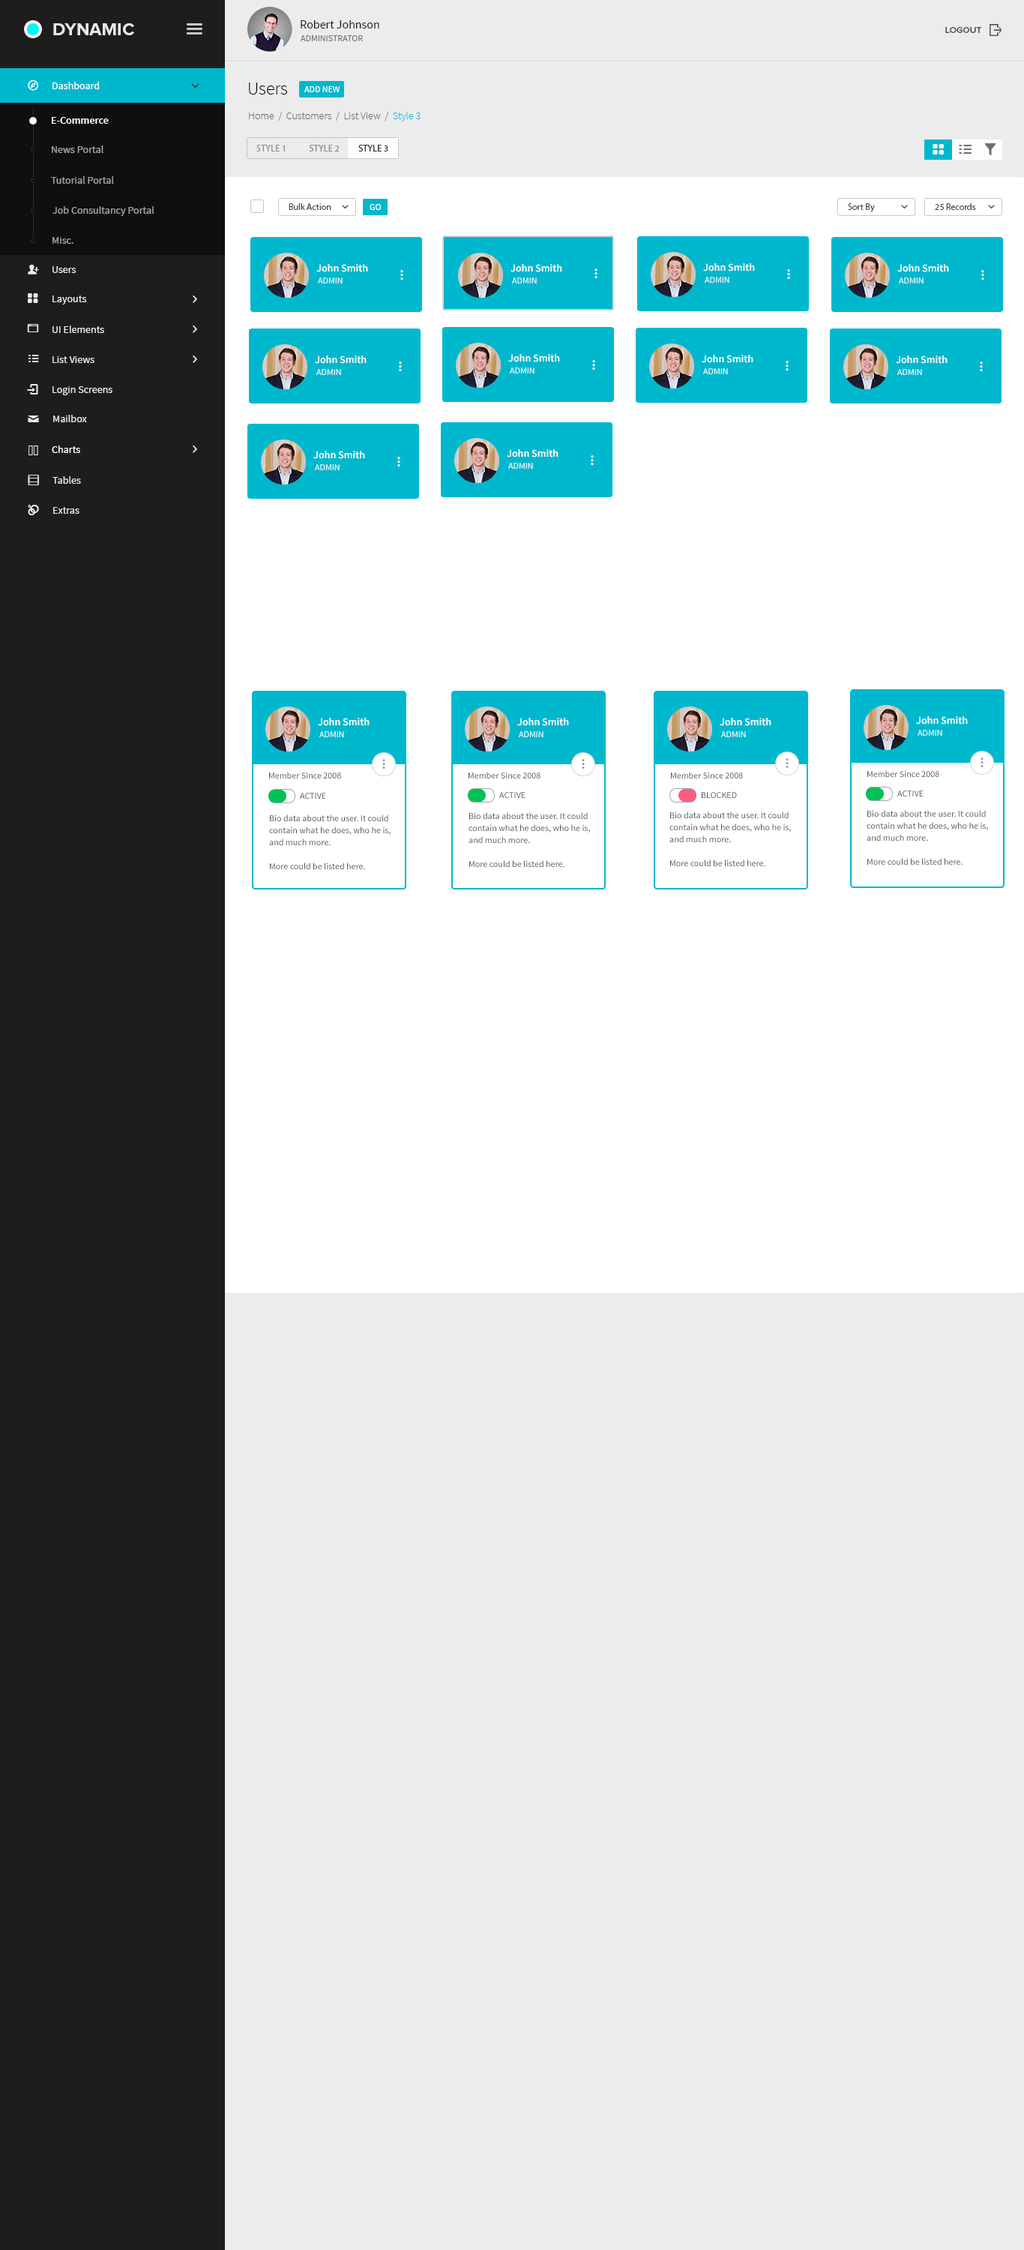
<style>
.page{position:relative;width:1024px;height:2250px;background:#ececec}
.page>*{position:absolute;margin:0}
.t1{font:18px "ProximaNova-Bold";color:#eae7e7;text-transform:uppercase}
.t2{font:12px "SourceSansPro-Regular";color:#1d1d1d}
.t3{font:9px "ProximaNova-Semibold";color:#535353;font-variant:small-caps}
.t4{font:9px "SourceSansPro-Regular";color:#767575}
.t5{font:10.5px "SourceSansPro-Regular";color:#ffffff}
.t6{font:10.5px "SourceSansPro-Regular";color:#ffffff;font-variant:small-caps}
.t7{font:18px "SourceSansPro-Light";color:#010101}
.t8{font:9px "SourceSansPro-Regular";color:#ffffff;text-transform:uppercase}
.t9{font:10.5px "SourceSansPro-Light";color:#6d6c6c}
.t10{font:10.5px "SourceSansPro-Light";color:#00b8ce}
.t11{font:10.5px "SourceSansPro-Semibold";color:#ffffff}
.t12{font:10.5px "SourceSansPro-Regular";color:#a6a5a5}
.t13{font:9px "MyriadPro-Regular";color:#8f8f8f;text-transform:uppercase}
.t14{font:9px "MyriadPro-Regular";color:#8a8a8a;text-transform:uppercase}
.t15{font:9px "MyriadPro-Regular";color:#2b2b2b;text-transform:uppercase}
.t16{font:10.2px "SourceSansPro-Regular";color:#a6a5a5}
.t17{font:9px "MyriadPro-Regular";color:#4e4e4e}
.t18{font:10.5px "SourceSansPro-Regular";color:#ebebeb}
.t19{font:10.2px "SourceSansPro-Regular";color:#ebebeb}
.t20{font:9px "SourceSansPro-Regular";color:#565555}
.t21{font:9px "SourceSansPro-Regular";text-transform:uppercase}
.t22{font:9px "SourceSansPro-Regular";color:#565555;text-transform:uppercase}
.t23{font:9px/12px "SourceSansPro-Regular";color:#565555}
</style>
<div class="page">
<p class="t1" style="left:53px;top:23px;width:81px;height:12px">DYNAMIC</p>
<p class="t2" style="left:301px;top:20px;width:79px;height:8px">Robert Johnson</p>
<p class="t3" style="left:946px;top:27px;width:36px;height:6px">LOGOUT</p>
<p class="t4" style="left:300px;top:35px;width:63px;height:6px">ADMINISTRATOR</p>
<p class="t5" style="left:52px;top:82px;width:47px;height:7px"><span class="t6">D</span>ashboard</p>
<p class="t7" style="left:249px;top:82px;width:38px;height:12px">Users</p>
<p class="t8" style="left:304px;top:86px;width:36px;height:6px">add new</p>
<p class="t9" style="left:249px;top:112px;width:172px;height:10px">Home  /  Customers  /  List View  /  <span class="t10">Style 3</span></p>
<p class="t11" style="left:52px;top:117px;width:57px;height:7px">E-Commerce</p>
<p class="t12" style="left:52px;top:146px;width:52px;height:7px">News Portal</p>
<p class="t13" style="left:256px;top:145px;width:132px;height:7px">Style 1            <span class="t14">Style 2          </span><span class="t15">Style 3</span></p>
<p class="t16" style="left:51px;top:176px;width:63px;height:8px">Tutorial Portal</p>
<p class="t16" style="left:52px;top:206px;width:102px;height:10px">Job Consultancy Portal</p>
<p class="t17" style="left:289px;top:203px;width:43px;height:7px">Bulk Action</p>
<p class="t8" style="left:370px;top:204px;width:11px;height:6px">go</p>
<p class="t17" style="left:848px;top:203px;width:27px;height:9px">Sort By</p>
<p class="t17" style="left:935px;top:203px;width:41px;height:7px">25 Records</p>
<p class="t16" style="left:52px;top:237px;width:22px;height:7px">Misc.</p>
<p class="t18" style="left:52px;top:266px;width:24px;height:7px">Users</p>
<p class="t11" style="left:316px;top:264px;width:52px;height:8px">John Smith</p>
<p class="t11" style="left:511px;top:264px;width:51px;height:8px">John Smith</p>
<p class="t11" style="left:704px;top:263px;width:51px;height:9px">John Smith</p>
<p class="t11" style="left:898px;top:264px;width:52px;height:8px">John Smith</p>
<p class="t8" style="left:318px;top:278px;width:25px;height:6px">admin</p>
<p class="t8" style="left:512px;top:278px;width:25px;height:6px">admin</p>
<p class="t8" style="left:705px;top:277px;width:25px;height:6px">admin</p>
<p class="t8" style="left:899px;top:278px;width:25px;height:6px">admin</p>
<p class="t18" style="left:52px;top:296px;width:34px;height:8px">Layouts</p>
<p class="t18" style="left:52px;top:326px;width:52px;height:7px">UI Elements</p>
<p class="t18" style="left:52px;top:356px;width:42px;height:7px">List Views</p>
<p class="t11" style="left:315px;top:356px;width:52px;height:8px">John Smith</p>
<p class="t11" style="left:508px;top:354px;width:52px;height:8px">John Smith</p>
<p class="t11" style="left:702px;top:355px;width:52px;height:8px">John Smith</p>
<p class="t11" style="left:896px;top:356px;width:52px;height:8px">John Smith</p>
<p class="t8" style="left:316px;top:369px;width:25px;height:6px">admin</p>
<p class="t8" style="left:510px;top:368px;width:25px;height:6px">admin</p>
<p class="t8" style="left:704px;top:368px;width:24px;height:6px">admin</p>
<p class="t8" style="left:898px;top:369px;width:24px;height:6px">admin</p>
<p class="t18" style="left:52px;top:386px;width:60px;height:9px">Login Screens</p>
<p class="t18" style="left:53px;top:415px;width:34px;height:7px">Mailbox</p>
<p class="t5" style="left:52px;top:446px;width:28px;height:7px">Charts</p>
<p class="t11" style="left:507px;top:449px;width:52px;height:9px">John Smith</p>
<p class="t11" style="left:314px;top:451px;width:51px;height:8px">John Smith</p>
<p class="t8" style="left:315px;top:464px;width:25px;height:6px">admin</p>
<p class="t8" style="left:508px;top:463px;width:25px;height:6px">admin</p>
<p class="t19" style="left:52px;top:476px;width:29px;height:8px">Tables</p>
<p class="t19" style="left:53px;top:507px;width:27px;height:7px">Extras</p>
<p class="t11" style="left:318px;top:718px;width:52px;height:8px">John Smith</p>
<p class="t11" style="left:518px;top:718px;width:51px;height:8px">John Smith</p>
<p class="t11" style="left:720px;top:718px;width:52px;height:8px">John Smith</p>
<p class="t11" style="left:916px;top:716px;width:52px;height:8px">John Smith</p>
<p class="t8" style="left:320px;top:731px;width:24px;height:6px">admin</p>
<p class="t8" style="left:519px;top:731px;width:25px;height:6px">admin</p>
<p class="t8" style="left:722px;top:731px;width:24px;height:6px">admin</p>
<p class="t8" style="left:918px;top:730px;width:25px;height:6px">admin</p>
<p class="t20" style="left:269px;top:772px;width:72px;height:6px">Member Since 2008</p>
<p class="t20" style="left:469px;top:772px;width:72px;height:6px">Member Since 2008</p>
<p class="t20" style="left:671px;top:772px;width:72px;height:6px">Member Since 2008</p>
<p class="t20" style="left:868px;top:770px;width:72px;height:7px">Member Since 2008</p>
<p class="t21" style="left:300px;top:793px;width:26px;height:6px">active</p>
<p class="t21" style="left:500px;top:792px;width:26px;height:6px">active</p>
<p class="t22" style="left:702px;top:792px;width:35px;height:6px">blocked</p>
<p class="t21" style="left:898px;top:790px;width:26px;height:6px">active</p>
<p class="t23" style="left:269px;top:814px;width:122px;height:55px">Bio data about the user. It could<br>contain what he does, who he is,<br>and much more.<br><br>More could be listed here.</p>
<p class="t23" style="left:469px;top:812px;width:121px;height:55px">Bio data about the user. It could<br>contain what he does, who he is,<br>and much more.<br><br>More could be listed here.</p>
<p class="t23" style="left:670px;top:812px;width:121px;height:54px">Bio data about the user. It could<br>contain what he does, who he is,<br>and much more.<br><br>More could be listed here.</p>
<p class="t23" style="left:867px;top:810px;width:121px;height:55px">Bio data about the user. It could<br>contain what he does, who he is,<br>and much more.<br><br>More could be listed here.</p>
</div>
